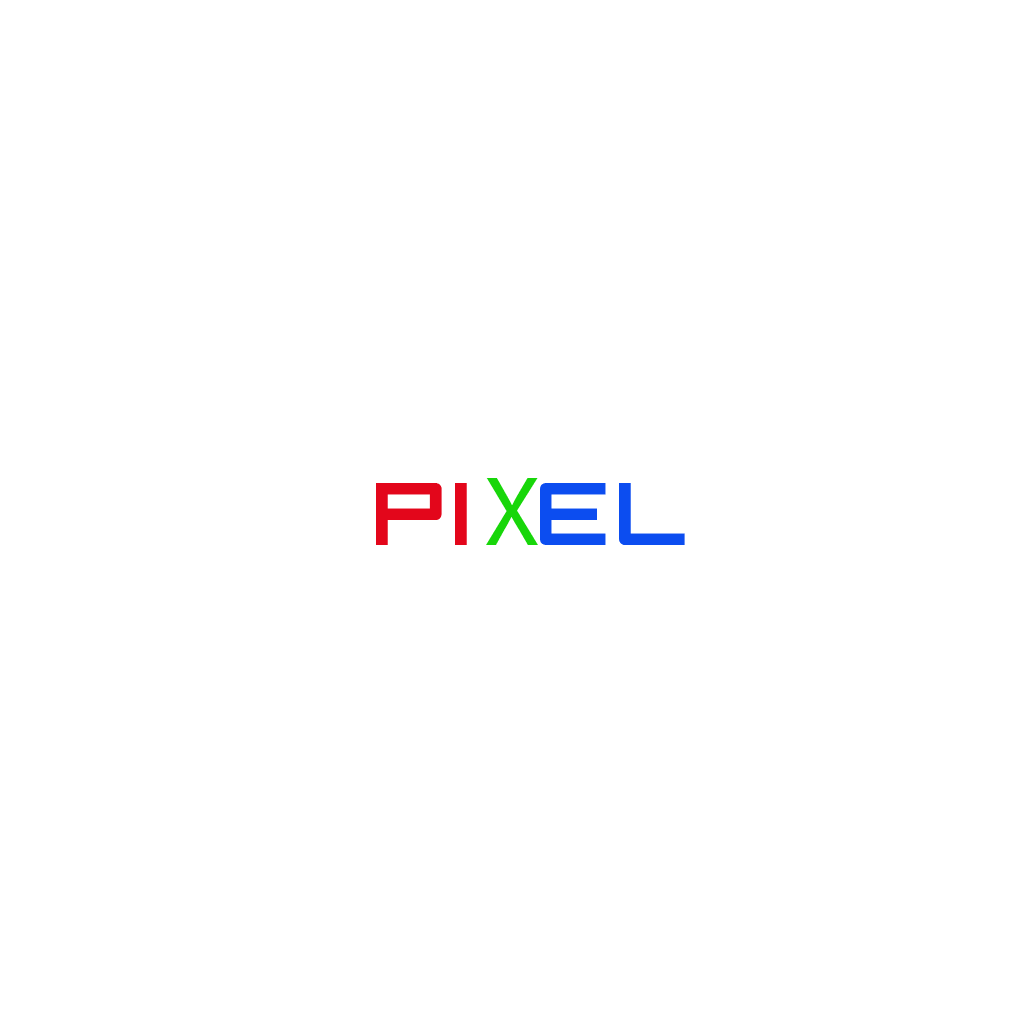
<style>
.page{position:relative;width:1024px;height:1024px;background:#ffffff}
.page>*{position:absolute;margin:0}
.t1{font:100px "QUBE";color:#e3061b}
.t2{font:100px "MyriadPro-Regular";color:#18d60a}
.t3{font:100px "QUBE";color:#0c4df0}
</style>
<div class="page">
<p class="t1" style="left:376px;top:478px;width:309px;height:67px">Pi<span class="t2">X</span><span class="t3">el</span></p>
</div>
